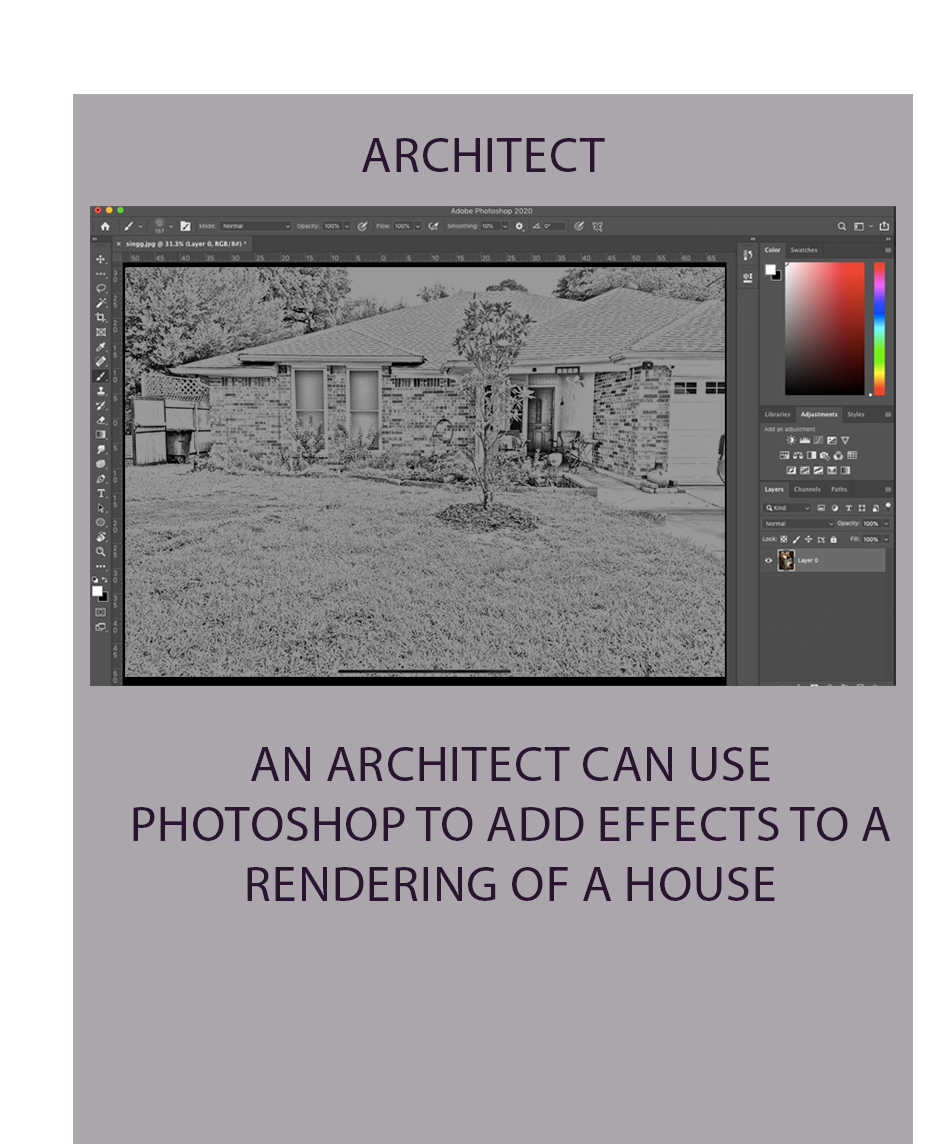
<style>
.page{position:relative;width:950px;height:1144px;background:#aaa6ab}
.page>*{position:absolute;margin:0}
.t1{font:50px "MyriadPro-Regular";color:#2a1531;text-transform:uppercase}
</style>
<div class="page">
<p class="t1" style="left:362px;top:138px;width:243px;height:34px">ARCHITECT</p>
<p class="t1" style="left:133px;top:747px;width:758px;height:154px;text-align:center">An architect can use photoshop to add effects to a rendering of a house</p>
</div>
